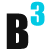
<style>
.page{position:relative;width:50px;height:50px;background:#ffffff}
.page>*{position:absolute;margin:0}
.t1{font:45px "Impact";color:#111111;text-transform:uppercase}
.t2{font:50px "Impact";color:#01cae4;text-transform:uppercase}
</style>
<div class="page">
<p class="t1" style="left:6px;top:1px;width:39px;height:48px">B<span class="t2">3</span></p>
</div>
